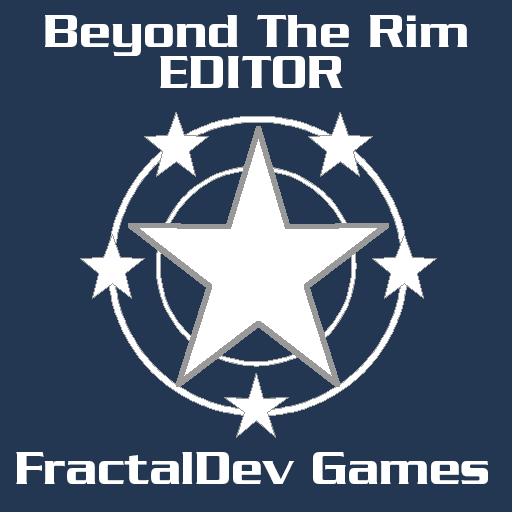
<style>
.page{position:relative;width:512px;height:512px;background:#243752}
.page>*{position:absolute;margin:0}
.t1{font:50px "Serpentine-Medium";color:#ffffff}
</style>
<div class="page">
<p class="t1" style="left:45px;top:15px;width:423px;height:41px">Beyond The Rim</p>
<p class="t1" style="left:160px;top:56px;width:183px;height:32px">EDITOR</p>
<p class="t1" style="left:16px;top:452px;width:472px;height:32px">FractalDev Games</p>
</div>
